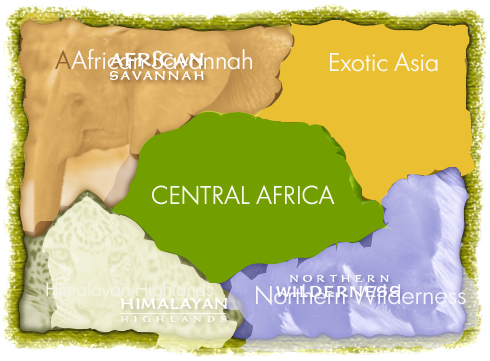
<style>
.page{position:relative;width:490px;height:361px}
.page>*{position:absolute;margin:0}
.t1{font:24px "LuzSans-Book";color:#fcfbf9}
.t2{font:24px "LuzSans-Book";color:#906432}
.t3{font:24px "LuzSans-Book";color:#fbf9f4}
.t4{font:24px "LuzSans-Book";color:#f6f8f1}
.t5{font:18px "LuzSans-Book";color:#f4f4eb}
.t6{font:24px "LuzSans-Book";color:#f5f5fb}
</style>
<div class="page">
<p class="t1" style="left:55px;top:49px;width:197px;height:21px"><span class="t2">A</span>African Savannah</p>
<p class="t3" style="left:330px;top:52px;width:108px;height:20px">Exotic Asia</p>
<p class="t4" style="left:152px;top:185px;width:183px;height:20px">CENTRAL AFRICA</p>
<p class="t5" style="left:46px;top:281px;width:167px;height:20px">Himalayan Highlands</p>
<p class="t6" style="left:256px;top:284px;width:210px;height:21px">Northern Wilderness</p>
</div>
